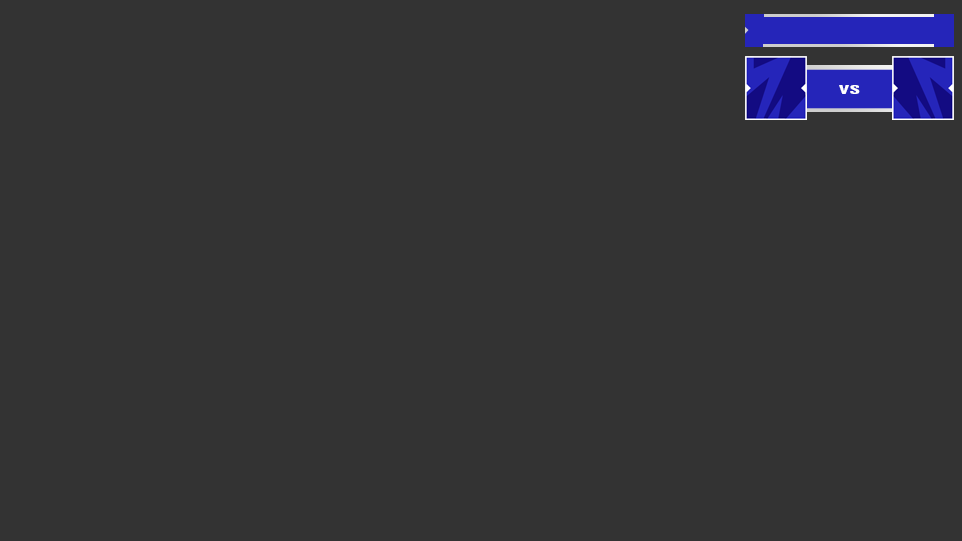
<style>
.page{position:relative;width:962px;height:541px;background:#333333}
.page>*{position:absolute;margin:0}
.t1{font:15.9px "AkzidenzGroteskBQ-BdCnd";color:#ffffff;scale:1.8 1}
</style>
<div class="page">
<p class="t1" style="left:839px;top:85px;width:21px;height:9px">vs</p>
</div>
